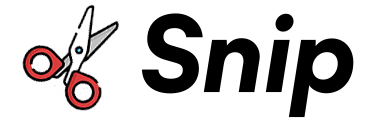
<style>
.page{position:relative;width:375px;height:125px;background:#ffffff}
.page>*{position:absolute;margin:0}
.t1{font:104.2px "Satoshi-BlackItalic";color:#000000}
</style>
<div class="page">
<p class="t1" style="left:141px;top:13px;width:213px;height:105px">Snip</p>
</div>
